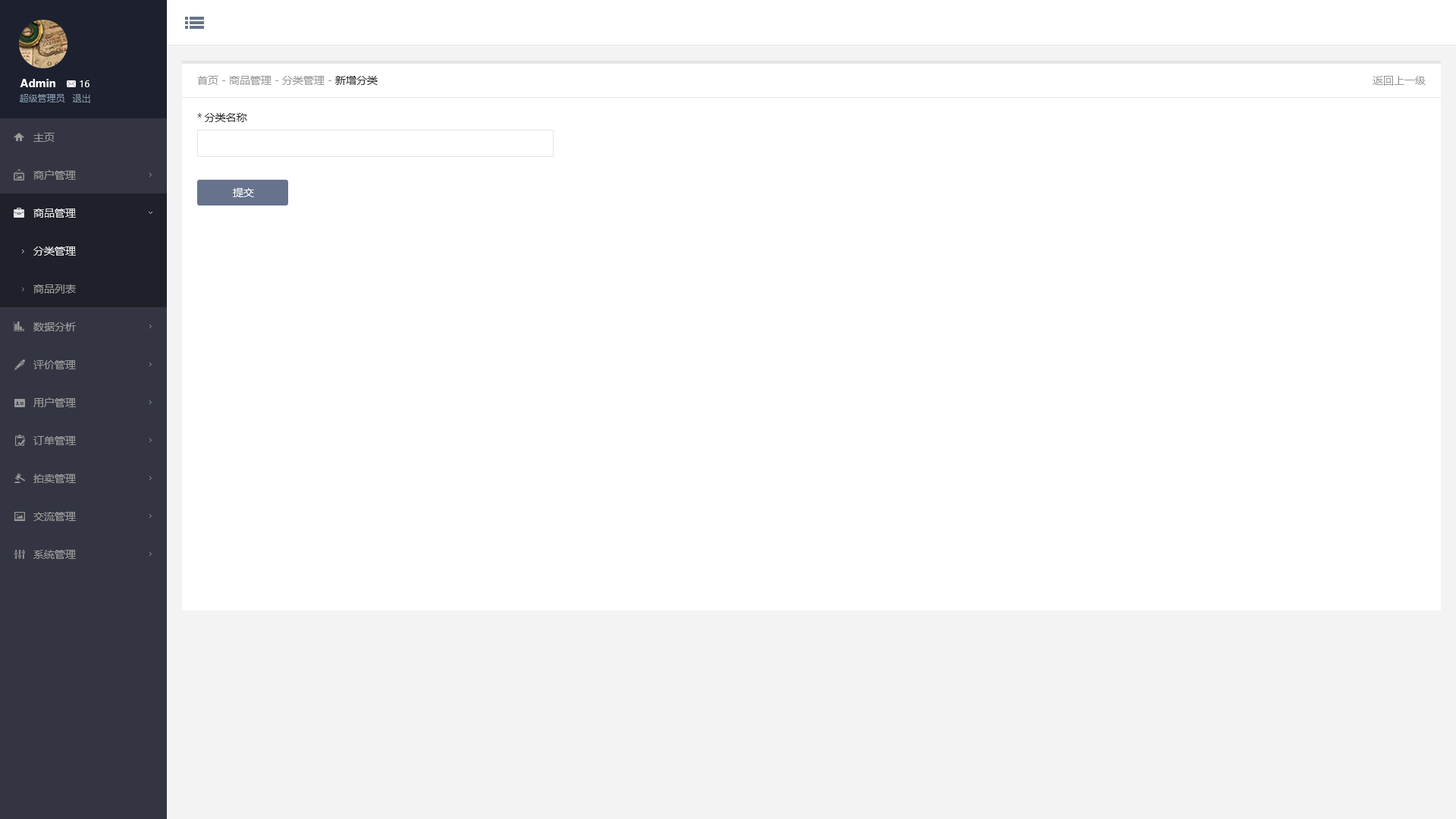
<style>
.page{position:relative;width:1456px;height:819px;background:#ffffff}
.page>*{position:absolute;margin:0}
.t1{font:10.6px "MicrosoftYaHei";color:#999999}
.t2{font:10.6px "MicrosoftYaHei";color:#333333}
.t3{font:10.6px "MicrosoftYaHei-Bold";color:#ffffff}
.t4{font:9.1px "MicrosoftYaHei";color:#ffffff}
.t5{font:9.1px "MicrosoftYaHei";color:#8095a8}
.t6{font:10.6px/37.9px "MicrosoftYaHei";color:#999999}
.t7{font:10.6px/37.9px "MicrosoftYaHei";color:#e6e6e6}
.t8{font:10.6px "MicrosoftYaHei";color:#ffffff}
</style>
<div class="page">
<p class="t1" style="left:197px;top:76px;width:181px;height:9px">首页 - 商品管理 - 分类管理 - <span class="t2">新增分类</span></p>
<p class="t1" style="left:1373px;top:76px;width:53px;height:10px">返回上一级</p>
<p class="t3" style="left:20px;top:79px;width:35px;height:8px">Admin</p>
<p class="t4" style="left:80px;top:80px;width:9px;height:7px">16</p>
<p class="t5" style="left:20px;top:94px;width:45px;height:8px">超级管理员</p>
<p class="t5" style="left:72px;top:94px;width:18px;height:9px">退出</p>
<p class="t2" style="left:197px;top:113px;width:50px;height:9px">*分类名称</p>
<p class="t6" style="left:33px;top:133px;width:43px;height:426px">主页<br>商户管理<br><span class="t7">商品管理<br></span><br><br>数据分析<br>评价管理<br>用户管理<br>订单管理<br>拍卖管理<br>交流管理<br>系统管理</p>
<p class="t8" style="left:233px;top:188px;width:21px;height:9px">提交</p>
<p class="t7" style="left:33px;top:246px;width:43px;height:47px">分类管理<br><span class="t6">商品列表</span></p>
</div>
